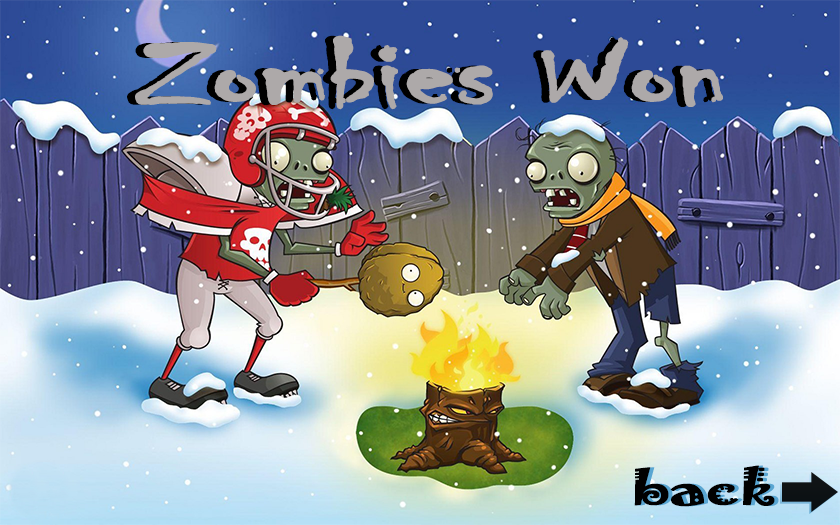
<style>
.page{position:relative;width:840px;height:525px}
.page>*{position:absolute;margin:0}
.t1{font:103.7px "Chiller-Regular";letter-spacing:-0.02em;font-weight:bold;scale:1.43 1}
.t2{font:103.7px "Chiller-Regular";letter-spacing:-0.02em;color:#ada9a9;font-weight:bold;scale:1.43 1}
.t3{font:44.3px "Jokerman-Regular";letter-spacing:-0.02em;color:#010101;font-weight:bold;scale:1.43 1}
.t4{font:44.3px "Jokerman-Regular";letter-spacing:-0.02em;font-weight:bold;scale:1.43 1}
</style>
<div class="page">
<p class="t1" style="left:127px;top:35px;width:588px;height:75px">Zombies Won</p>
<p class="t2" style="left:135px;top:35px;width:588px;height:75px">Zombies Won</p>
<p class="t3" style="left:634px;top:465px;width:141px;height:42px">back</p>
<p class="t4" style="left:638px;top:465px;width:141px;height:42px">back</p>
</div>
